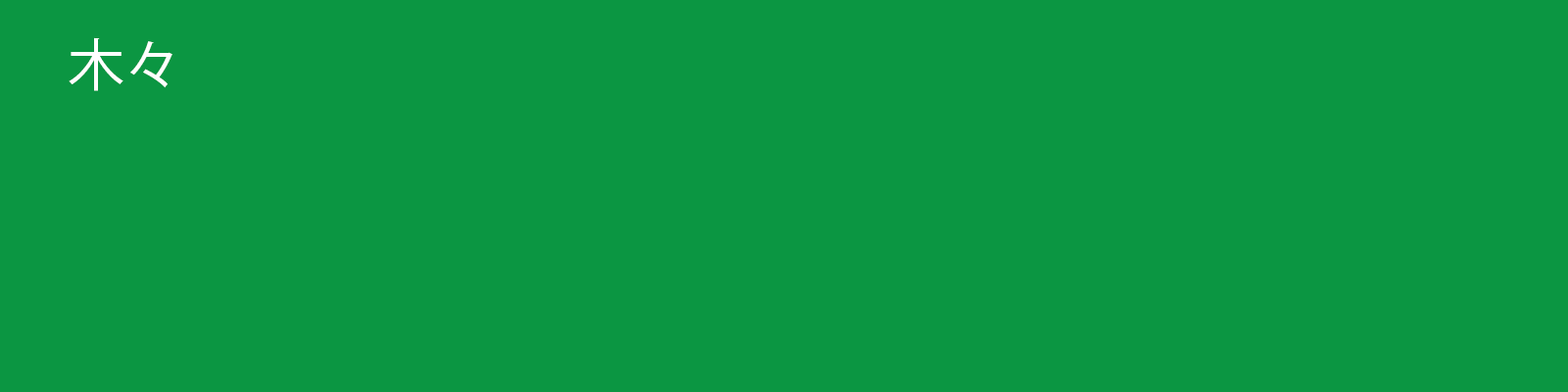
<style>
.page{position:relative;width:1568px;height:392px;background:#0b9642}
.page>*{position:absolute;margin:0}
.t1{font:57.2px "KozGoPr6N-Regular";color:#ffffff}
</style>
<div class="page">
<p class="t1" style="left:69px;top:37px;width:103px;height:54px">木々</p>
</div>
